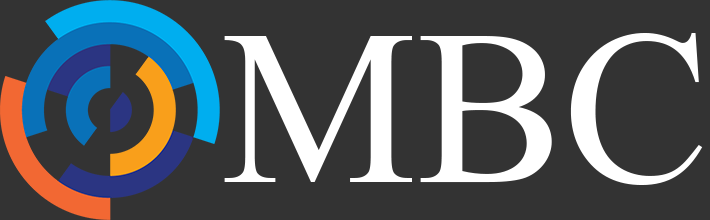
<style>
.page{position:relative;width:710px;height:220px;background:#333333}
.page>*{position:absolute;margin:0}
.t1{font:220px "MongolianBaiti";color:#ffffff}
</style>
<div class="page">
<p class="t1" style="left:224px;top:33px;width:479px;height:152px">MBC</p>
</div>
